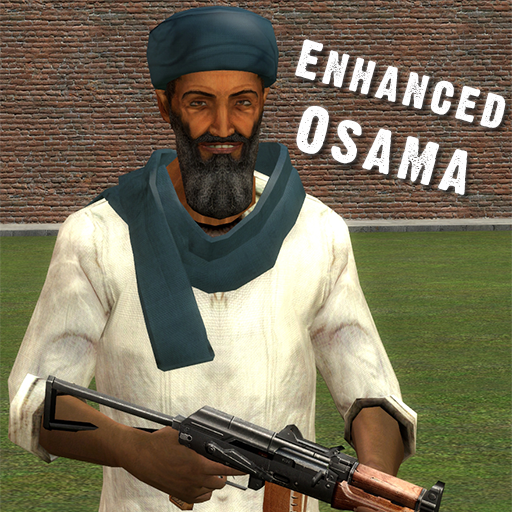
<style>
.page{position:relative;width:512px;height:512px}
.page>*{position:absolute;margin:0}
.t1{font:47px "DirtyHeadline";letter-spacing:0.1em;color:#fefefe}
.t2{font:60px "DirtyHeadline";letter-spacing:0.1em;color:#fefefe}
</style>
<div class="page">
<p class="t1" style="left:295px;top:39px;width:211px;height:156px;text-align:center;rotate:15deg">Enhanced<br><span class="t2">Osama</span></p>
</div>
